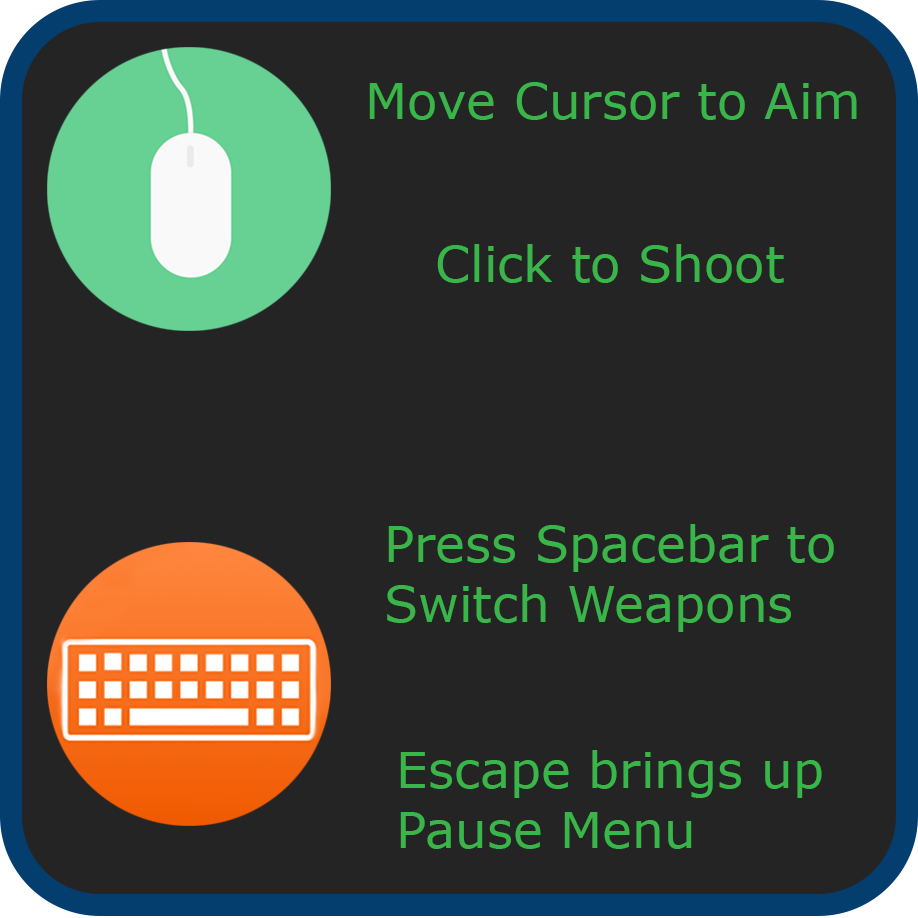
<style>
.page{position:relative;width:918px;height:918px;background:#242424}
.page>*{position:absolute;margin:0}
.t1{font:50px "Verdana";color:#39b54a}
</style>
<div class="page">
<p class="t1" style="left:369px;top:82px;width:488px;height:38px">Move Cursor to Aim</p>
<p class="t1" style="left:437px;top:244px;width:347px;height:39px">Click to Shoot</p>
<p class="t1" style="left:387px;top:524px;width:447px;height:108px">Press Spacebar to<br>Switch Weapons</p>
<p class="t1" style="left:400px;top:750px;width:422px;height:99px">Escape brings up<br>Pause Menu</p>
</div>
